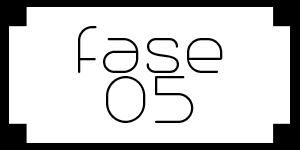
<style>
.page{position:relative;width:300px;height:150px;background:#ffffff}
.page>*{position:absolute;margin:0}
.t1{font:83.3px "Trench-Thin";color:#010101}
</style>
<div class="page">
<p class="t1" style="left:78px;top:26px;width:145px;height:47px">fase</p>
<p class="t1" style="left:106px;top:76px;width:88px;height:47px">05</p>
</div>
